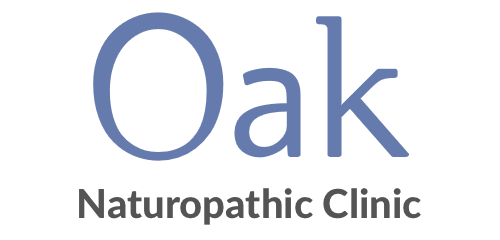
<style>
.page{position:relative;width:500px;height:240px;background:#ffffff}
.page>*{position:absolute;margin:0}
.t1{font:200px "Buda-Light";color:#657bae}
.t2{font:40px "Lato-Heavy";color:#545454}
</style>
<div class="page">
<p class="t1" style="left:95px;top:14px;width:313px;height:145px">Oak</p>
<p class="t2" style="left:79px;top:188px;width:342px;height:37px">Naturopathic Clinic</p>
</div>
